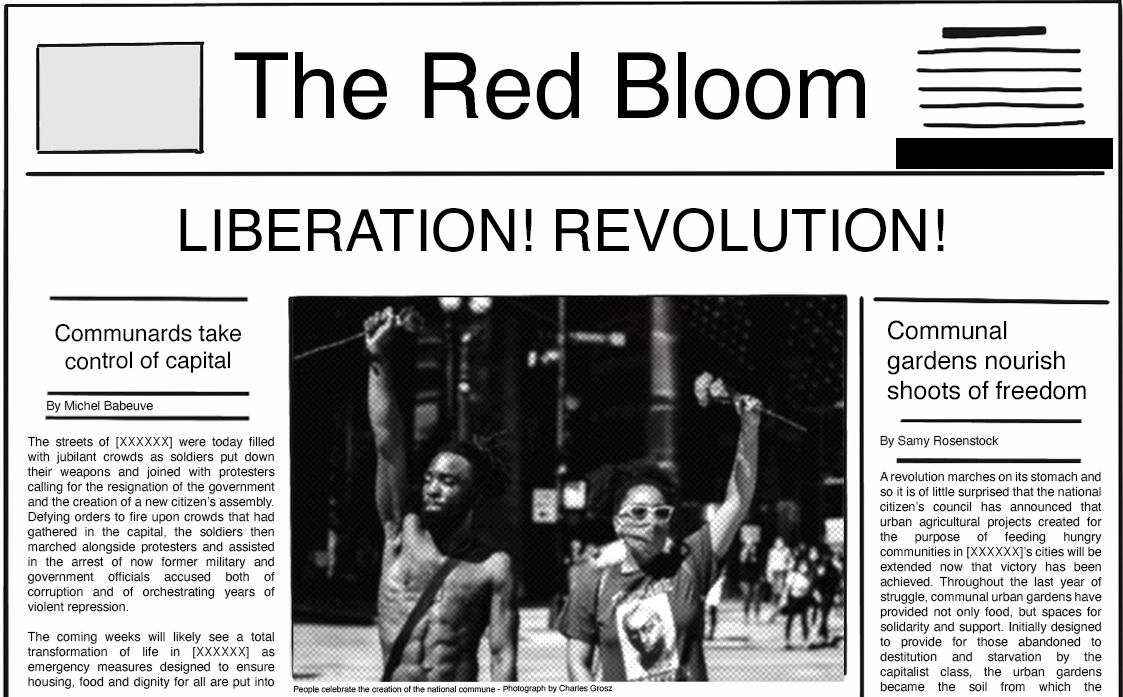
<style>
.page{position:relative;width:1123px;height:697px;background:#fefefe}
.page>*{position:absolute;margin:0}
.t1{font:91.7px "Helvetica";color:#000000}
.t2{font:58.3px "Helvetica";color:#000000;text-transform:uppercase}
.t3{font:22.9px "Helvetica";color:#000000}
.t4{font:25px "Helvetica";color:#000000}
.t5{font:12.5px "Helvetica";color:#000000}
.t6{font:8.3px "Helvetica";color:#000000}
</style>
<div class="page">
<p class="t1" style="left:234px;top:52px;width:631px;height:68px">The Red Bloom</p>
<p class="t2" style="left:180px;top:208px;width:764px;height:44px">Liberation! Revolution!</p>
<p class="t3" style="left:55px;top:323px;width:187px;height:50px;text-align:center">Communards take control of capital</p>
<p class="t4" style="left:887px;top:320px;width:199px;height:80px">Communal gardens nourish shoots of freedom</p>
<p class="t5" style="left:47px;top:400px;width:106px;height:13px">By Michel Babeuve</p>
<p class="t5" style="left:27px;top:436px;width:248px;height:253px;text-align:justify">The streets of [XXXXXX] were today filled with jubilant crowds as soldiers put down their weapons and joined with protesters calling for the resignation of the government and the creation of a new citizen’s assembly. Defying orders to fire upon crowds that had gathered in the capital, the soldiers then marched alongside protesters and assisted in the arrest of now former military and government officials accused both of corruption and of orchestrating years of violent repression.<br><br>The coming weeks will likely see a total transformation of life in [XXXXXX] as emergency measures designed to ensure housing, food and dignity for all are put into effect by the temporary national citizen’s council. Empty buildings will be appropriated, all workplaces are to be democratised and the urban gardens that were instrumental in the growth of the communes will be extended across the country. The citizen’s council is comprised of representatives from local communes across the nation and will assume temporary control of the country until the new citizen’s assembly reaches its conclusion.</p>
<p class="t5" style="left:880px;top:435px;width:119px;height:13px">By Samy Rosenstock</p>
<p class="t5" style="left:880px;top:471px;width:222px;height:221px;text-align:justify">A revolution marches on its stomach and so it is of little surprised that the national citizen’s council has announced that urban agricultural projects created for the purpose of feeding hungry communities in [XXXXXX]’s cities will be extended now that victory has been achieved. Throughout the last year of struggle, communal urban gardens have provided not only food, but spaces for solidarity and support. Initially designed to provide for those abandoned to destitution and starvation by the capitalist class, the urban gardens became the soil from which the revolution grew.</p>
<p class="t6" style="left:293px;top:684px;width:320px;height:10px">People celebrate the creation of the national commune - Photograph by Charles Grosz</p>
</div>
